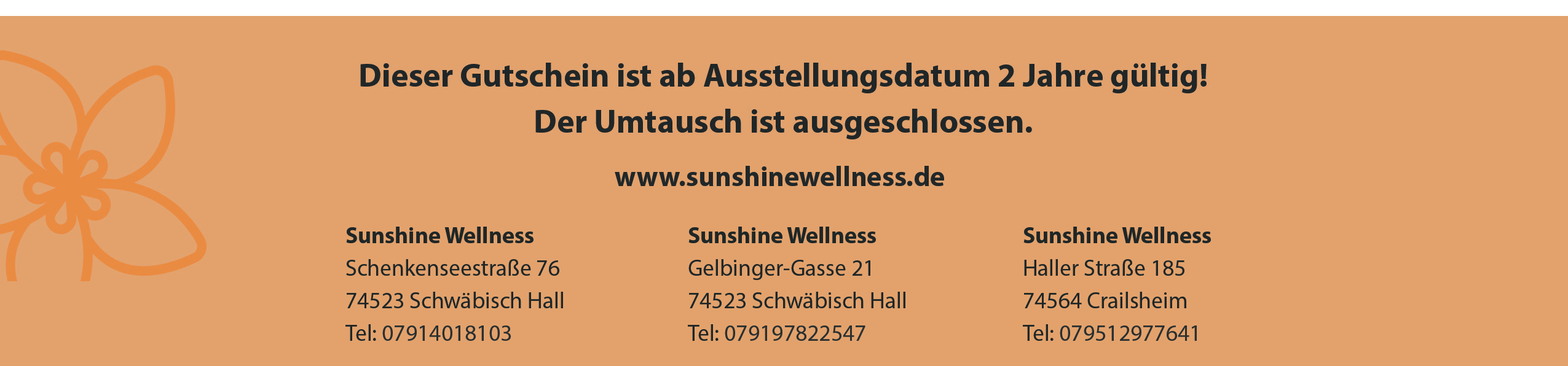
<style>
.page{position:relative;width:1568px;height:366px;background:#e3a26c}
.page>*{position:absolute;margin:0}
.t1{font:28.2px "MyriadPro-Bold";color:#212728}
.t2{font:23.1px/32.6px "MyriadPro-Regular";color:#1f2626}
.t3{font:23.1px/32.6px "MyriadPro-Bold";color:#1f2626}
.t4{font:23.1px/32.6px "MyriadPro-Regular";color:#2a2f2f}
</style>
<div class="page">
<p class="t1" style="left:615px;top:166px;width:329px;height:20px">www.sunshinewellness.de</p>
<p class="t2" style="left:345px;top:227px;width:218px;height:114px"><span class="t3">Sunshine Wellness<br></span>Schenkenseestraße 76<br>74523 Schwäbisch Hall<br>Tel: <span class="t4">07914018103</span></p>
<p class="t2" style="left:688px;top:227px;width:217px;height:114px"><span class="t3">Sunshine Wellness<br></span>Gelbinger-Gasse 21<br>74523 Schwäbisch Hall<br>Tel: <span class="t4">079197822547</span></p>
<p class="t2" style="left:1023px;top:227px;width:188px;height:114px"><span class="t3">Sunshine Wellness<br></span>Haller Straße 185<br>74564 Crailsheim<br>Tel: <span class="t4">079512977641</span></p>
</div>
